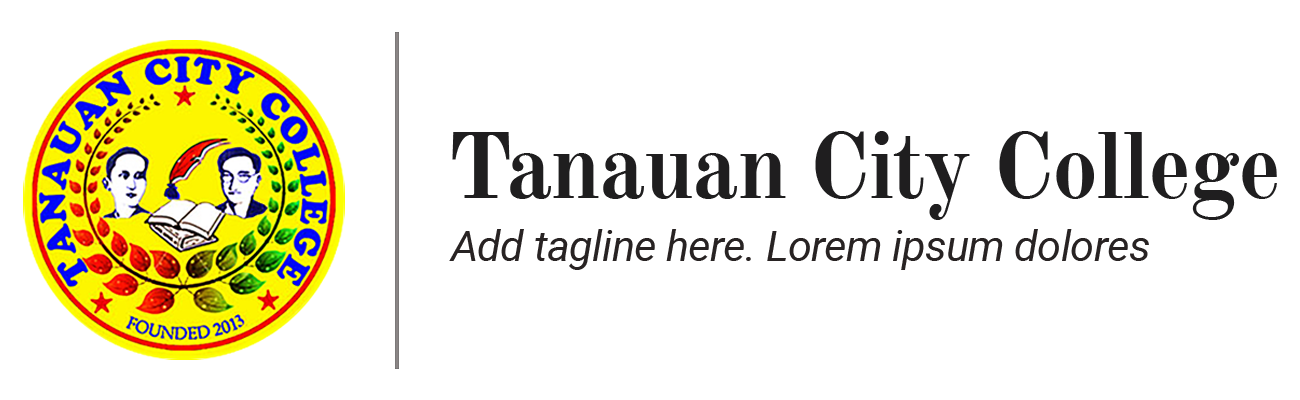
<style>
.page{position:relative;width:1300px;height:400px;background:#ffffff}
.page>*{position:absolute;margin:0}
.t1{font:91.9px "OldStandardTT-Bold";letter-spacing:-0.025em;color:#1f1e1f}
.t2{font:42.4px "Roboto-Italic";letter-spacing:-0.01em;color:#282323}
</style>
<div class="page">
<p class="t1" style="left:452px;top:131px;width:825px;height:89px">Tanauan City College</p>
<p class="t2" style="left:449px;top:229px;width:700px;height:41px">Add tagline here. Lorem ipsum dolores</p>
</div>
